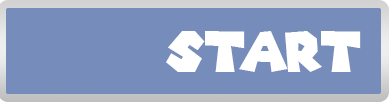
<style>
.page{position:relative;width:389px;height:102px;background:#768cbb}
.page>*{position:absolute;margin:0}
.t1{font:54.8px "SuperMarioGalaxy";color:#ffffff}
</style>
<div class="page">
<p class="t1" style="left:166px;top:31px;width:195px;height:41px">Start</p>
</div>
